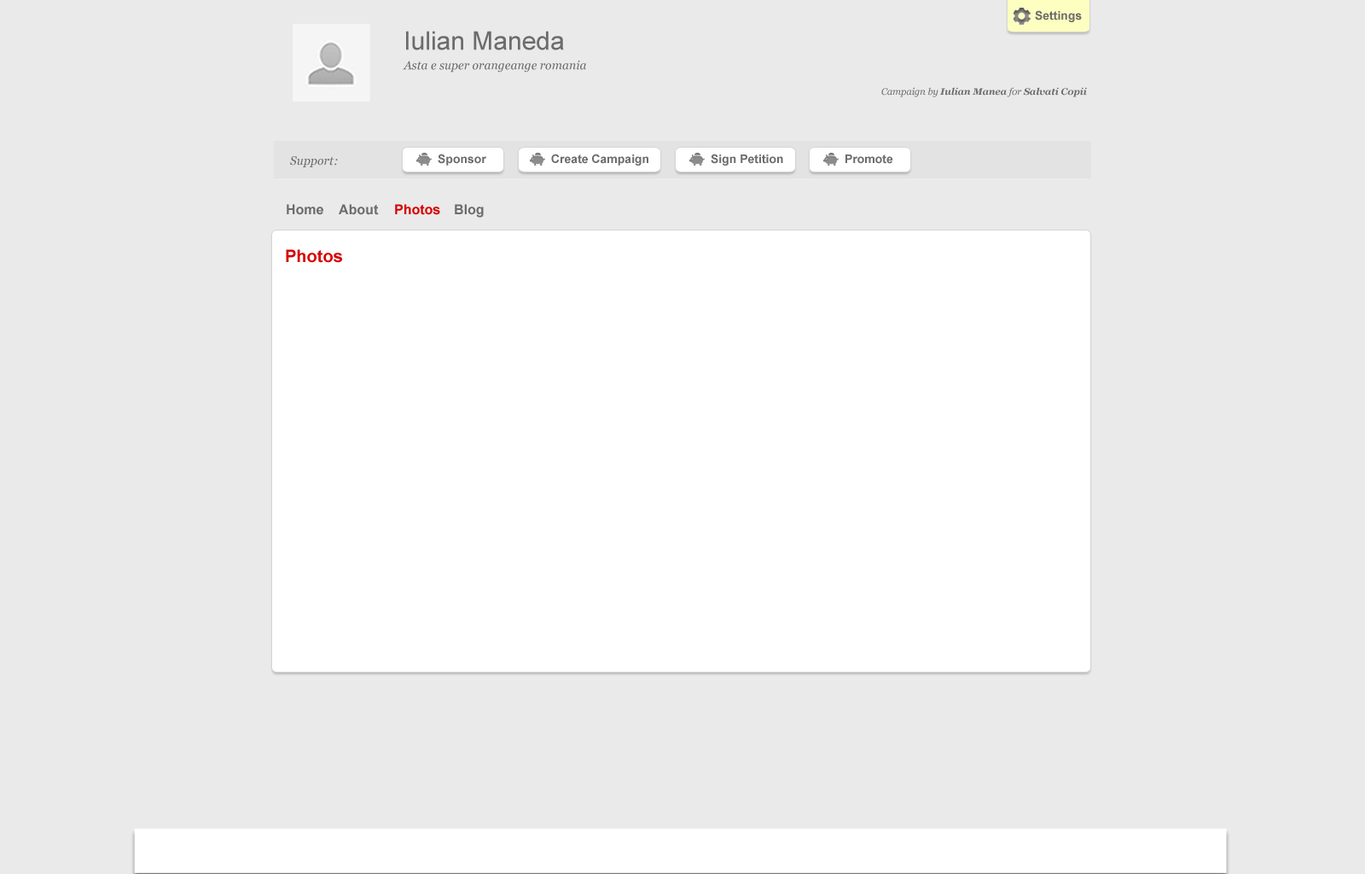
<style>
.page{position:relative;width:1365px;height:874px;background:#eaeaea}
.page>*{position:absolute;margin:0}
.t1{font:11.9px "Arial-BoldMT";color:#6c6c6c}
.t2{font:11.9px/19.6px "Georgia-Italic";color:#6c6c6c}
.t3{font:25.6px/19.6px "ArialMT";color:#6c6c6c}
.t4{font:9.4px "Georgia-BoldItalic";color:#6c6c6c}
.t5{font:9.4px "Georgia-Italic";color:#6c6c6c}
.t6{font:11.9px "Georgia-Italic";color:#6c6c6c}
.t7{font:13.6px "Arial-BoldMT";color:#6c6c6c}
.t8{font:13.6px "Arial-BoldMT";color:#d70000}
.t9{font:17.1px "Arial-BoldMT";color:#d70000}
</style>
<div class="page">
<p class="t1" style="left:1035px;top:10px;width:47px;height:12px">Settings</p>
<p class="t2" style="left:403px;top:31px;width:183px;height:42px"><span class="t3">Iulian Maneda<br></span>Asta e super orangeange romania</p>
<p class="t4" style="left:881px;top:87px;width:206px;height:10px"><span class="t5">Campaign by </span>Iulian Manea<span class="t5"> for </span>Salvati Copii</p>
<p class="t6" style="left:290px;top:156px;width:48px;height:11px">Support:</p>
<p class="t1" style="left:438px;top:154px;width:48px;height:12px">Sponsor</p>
<p class="t1" style="left:551px;top:154px;width:97px;height:12px">Create Campaign</p>
<p class="t1" style="left:711px;top:154px;width:72px;height:12px">Sign Petition</p>
<p class="t1" style="left:845px;top:154px;width:48px;height:10px">Promote</p>
<p class="t7" style="left:287px;top:204px;width:36px;height:11px">Home</p>
<p class="t7" style="left:339px;top:204px;width:40px;height:11px">About</p>
<p class="t8" style="left:395px;top:204px;width:45px;height:11px">Photos</p>
<p class="t7" style="left:455px;top:204px;width:29px;height:14px">Blog</p>
<p class="t9" style="left:286px;top:249px;width:56px;height:14px">Photos</p>
</div>
